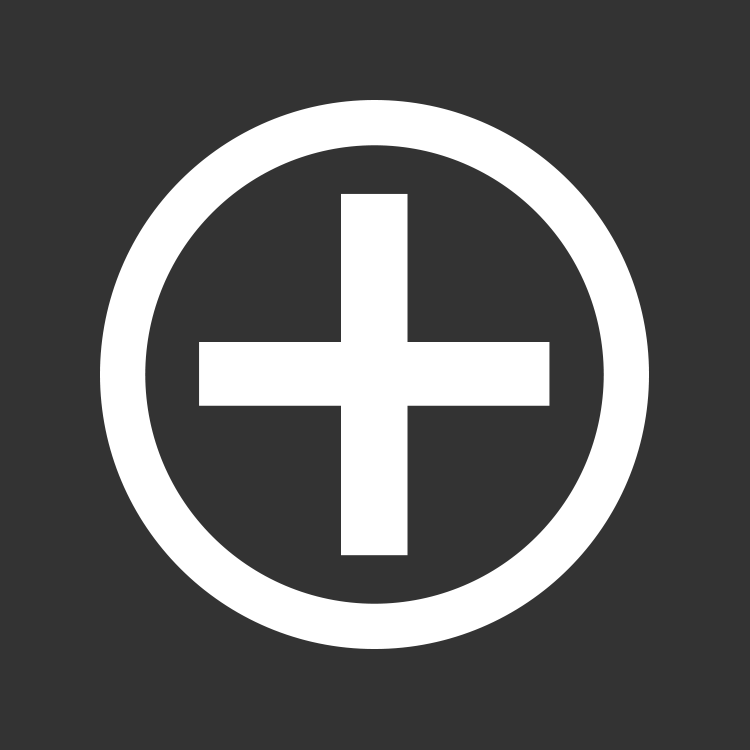
<style>
.page{position:relative;width:750px;height:750px;background:#333333}
.page>*{position:absolute;margin:0}
.t1{font:679.2px "MyriadPro-Bold";color:#ffffff}
</style>
<div class="page">
<p class="t1" style="left:199px;top:193px;width:351px;height:363px">+</p>
</div>
